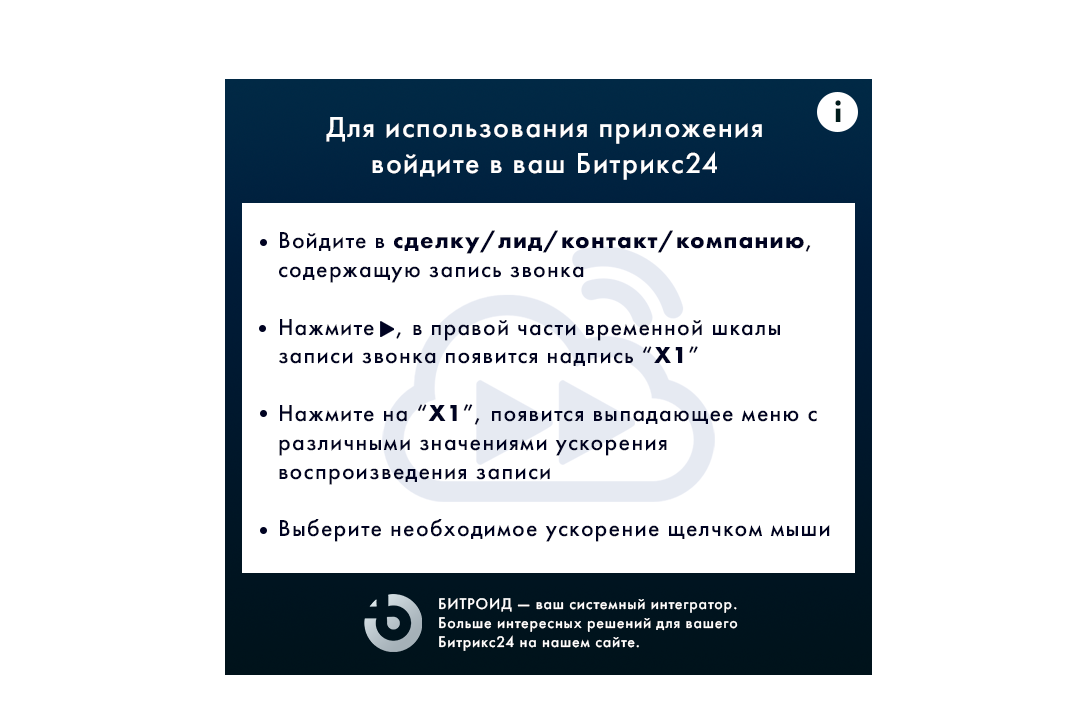
<style>
.page{position:relative;width:1080px;height:714px;background:#ffffff}
.page>*{position:absolute;margin:0}
.t1{font:30px "FuturaPT-Bold";letter-spacing:0.05em;color:#001c1c}
.t2{font:30px "FuturaPT-Medium";letter-spacing:0.05em;color:#ffffff}
.t3{font:24px "FuturaPT-Medium";letter-spacing:0.05em;color:#000322}
.t4{font:24px "FuturaPT-Bold";letter-spacing:0.05em;color:#000322}
.t5{font:16px "FuturaPT-Medium";letter-spacing:0.05em;color:#ffffff}
</style>
<div class="page">
<p class="t1" style="left:835px;top:100px;width:6px;height:22px">i</p>
<p class="t2" style="left:326px;top:117px;width:436px;height:63px;text-align:center">Для использования приложения войдите в ваш Битрикс24</p>
<p class="t3" style="left:279px;top:230px;width:551px;height:312px">Войдите в <span class="t4">сделку/лид/контакт/компанию</span>, содержащую запись звонка<br><br>Нажмите   , в правой части временной шкалы записи звонка появится надпись “<span class="t4">X1</span>”<br><br>Нажмите на “<span class="t4">X1</span>”, появится выпадающее меню с различными значениями ускорения воспроизведения записи<br><br>Выберите необходимое ускорение щелчком мыши</p>
<p class="t5" style="left:439px;top:598px;width:299px;height:53px">БИТРОИД — ваш системный интегратор. <br>Больше интересных решений для вашего Битрикс24 на нашем сайте.</p>
</div>
